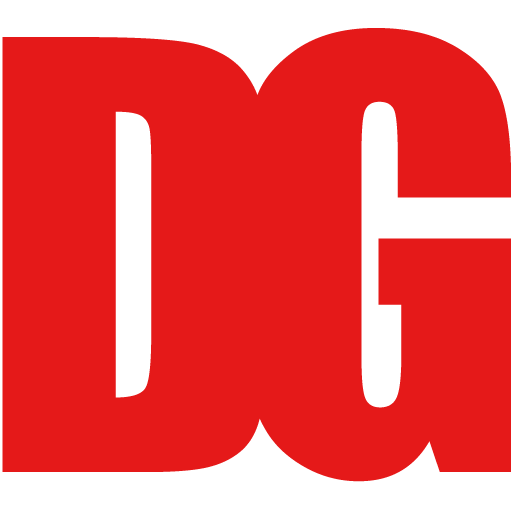
<style>
.page{position:relative;width:512px;height:512px;background:#e51919}
.page>*{position:absolute;margin:0}
.t1{font:550px "Impact";letter-spacing:-0.1em;color:#e51919}
</style>
<div class="page">
<p class="t1" style="left:2px;top:28px;width:509px;height:454px">DG</p>
</div>
